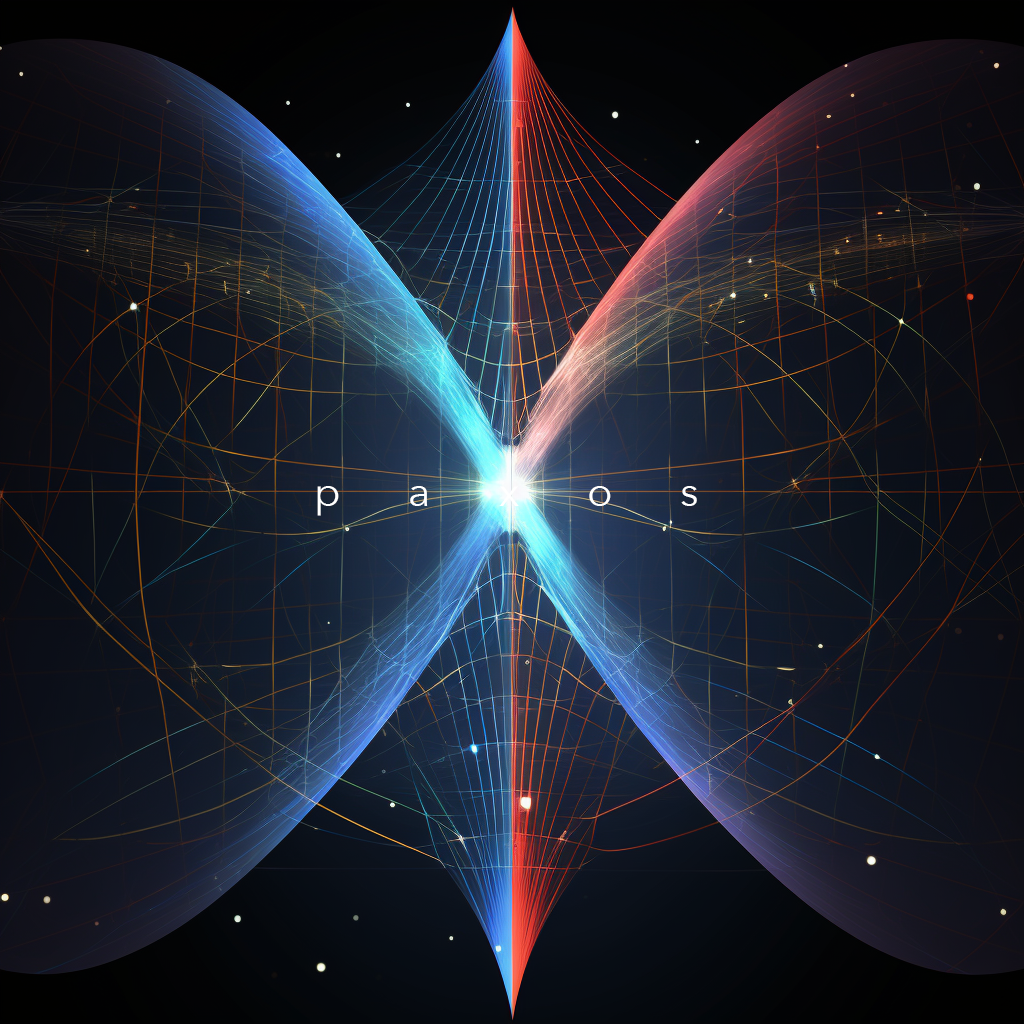
<style>
.page{position:relative;width:1024px;height:1024px}
.page>*{position:absolute;margin:0}
.t1{font:42.4px "AvenirNext-Regular";letter-spacing:1.6em;color:#ffffff}
</style>
<div class="page">
<p class="t1" style="left:317px;top:486px;width:380px;height:30px">paxos</p>
</div>
